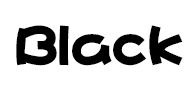
<style>
.page{position:relative;width:194px;height:89px;background:#ffffff}
.page>*{position:absolute;margin:0}
.t1{font:54px "DFHaiBaoW12-UB-HKP-BF";letter-spacing:-0.005em;color:#000000}
</style>
<div class="page">
<p class="t1" style="left:16px;top:25px;width:167px;height:41px">Black</p>
</div>
